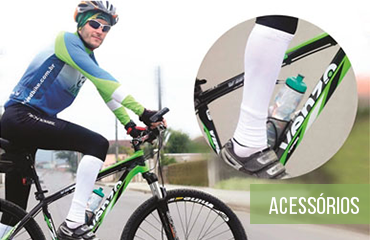
<style>
.page{position:relative;width:370px;height:240px}
.page>*{position:absolute;margin:0}
.t1{font:24px "BebasNeueRegular";letter-spacing:0.02em;color:#ffffff}
</style>
<div class="page">
<p class="t1" style="left:269px;top:193px;width:90px;height:21px">Acessórios</p>
</div>
